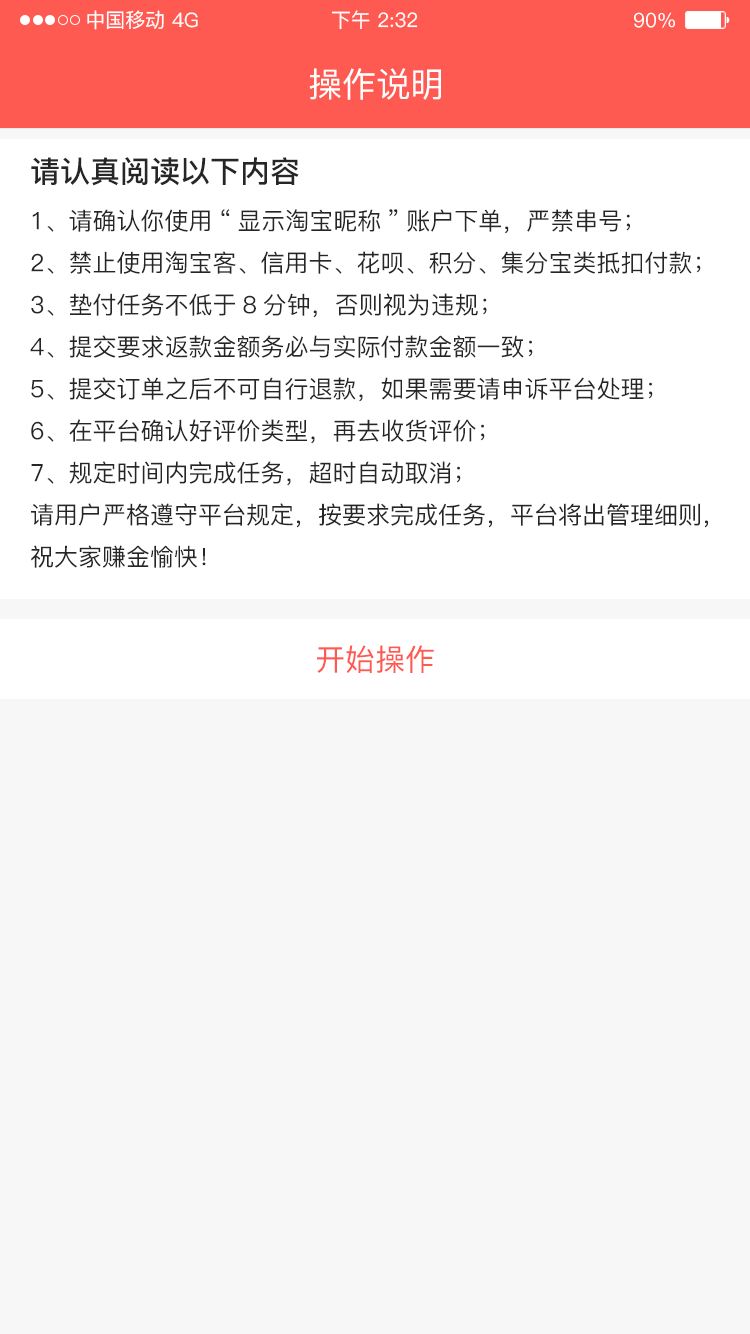
<style>
.page{position:relative;width:750px;height:1334px;background:#f7f7f7}
.page>*{position:absolute;margin:0}
.t1{font:20px "PingFang-SC-Medium";color:#ffffff}
.t2{font:34px "PingFang-SC-Medium";color:#ffffff}
.t3{font:24px "PingFang-SC-Medium";color:#262626}
.t4{font:30px "PingFang-SC-Bold";color:#262626}
.t5{font:30px "PingFang-SC-Medium";color:#fe5a51}
</style>
<div class="page">
<p class="t1" style="left:87px;top:10px;width:77px;height:20px">中国移动</p>
<p class="t1" style="left:172px;top:12px;width:26px;height:16px">4G</p>
<p class="t1" style="left:331px;top:10px;width:87px;height:20px">下午 2:32</p>
<p class="t1" style="left:634px;top:12px;width:41px;height:16px">90%</p>
<p class="t2" style="left:309px;top:68px;width:132px;height:32px">操作说明</p>
<p class="t3" style="left:30px;top:157px;width:678px;height:411px"><span class="t4">请认真阅读以下内容<br></span>1、请确认你使用“显示淘宝昵称”账户下单，严禁串号；<br>2、禁止使用淘宝客、信用卡、花呗、积分、集分宝类抵扣付款；<br>3、垫付任务不低于8分钟，否则视为违规；<br>4、提交要求返款金额务必与实际付款金额一致；<br>5、提交订单之后不可自行退款，如果需要请申诉平台处理；<br>6、在平台确认好评价类型，再去收货评价；<br>7、规定时间内完成任务，超时自动取消；<br>请用户严格遵守平台规定，按要求完成任务，平台将出管理细则，祝大家赚金愉快！</p>
<p class="t5" style="left:317px;top:645px;width:117px;height:28px">开始操作</p>
</div>
